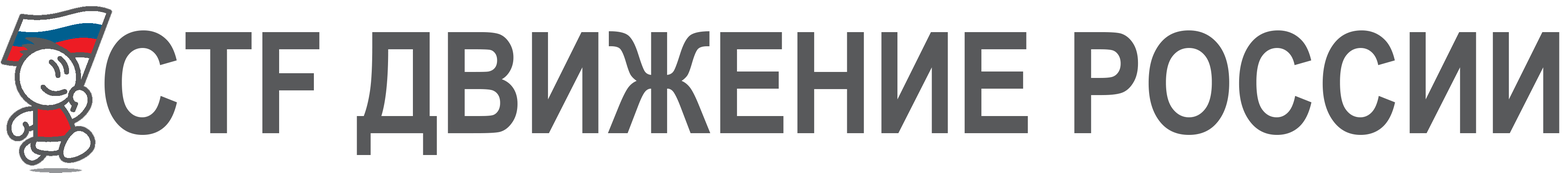
<style>
.page{position:relative;width:1568px;height:173px;background:#ffffff}
.page>*{position:absolute;margin:0}
.t1{font:141.5px "ArialNarrow-Bold";color:#58595b}
</style>
<div class="page">
<p class="t1" style="left:104px;top:30px;width:1455px;height:125px">CTF ДВИЖЕНИЕ РОССИИ</p>
</div>
